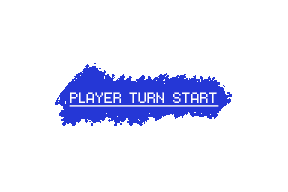
<style>
.page{position:relative;width:288px;height:192px;background:#ffffff}
.page>*{position:absolute;margin:0}
.t1{font:24px "at01";color:#ffffff;text-decoration:underline}
</style>
<div class="page">
<p class="t1" style="left:69px;top:92px;width:150px;height:15px">PLAYER TURN START</p>
</div>
